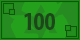
<style>
.page{position:relative;width:80px;height:40px;background:#24a01d}
.page>*{position:absolute;margin:0}
.t1{font:25.4px "MyriadPro-BoldCond";color:#1c4719}
</style>
<div class="page">
<p class="t1" style="left:24px;top:13px;width:31px;height:17px">100</p>
</div>
